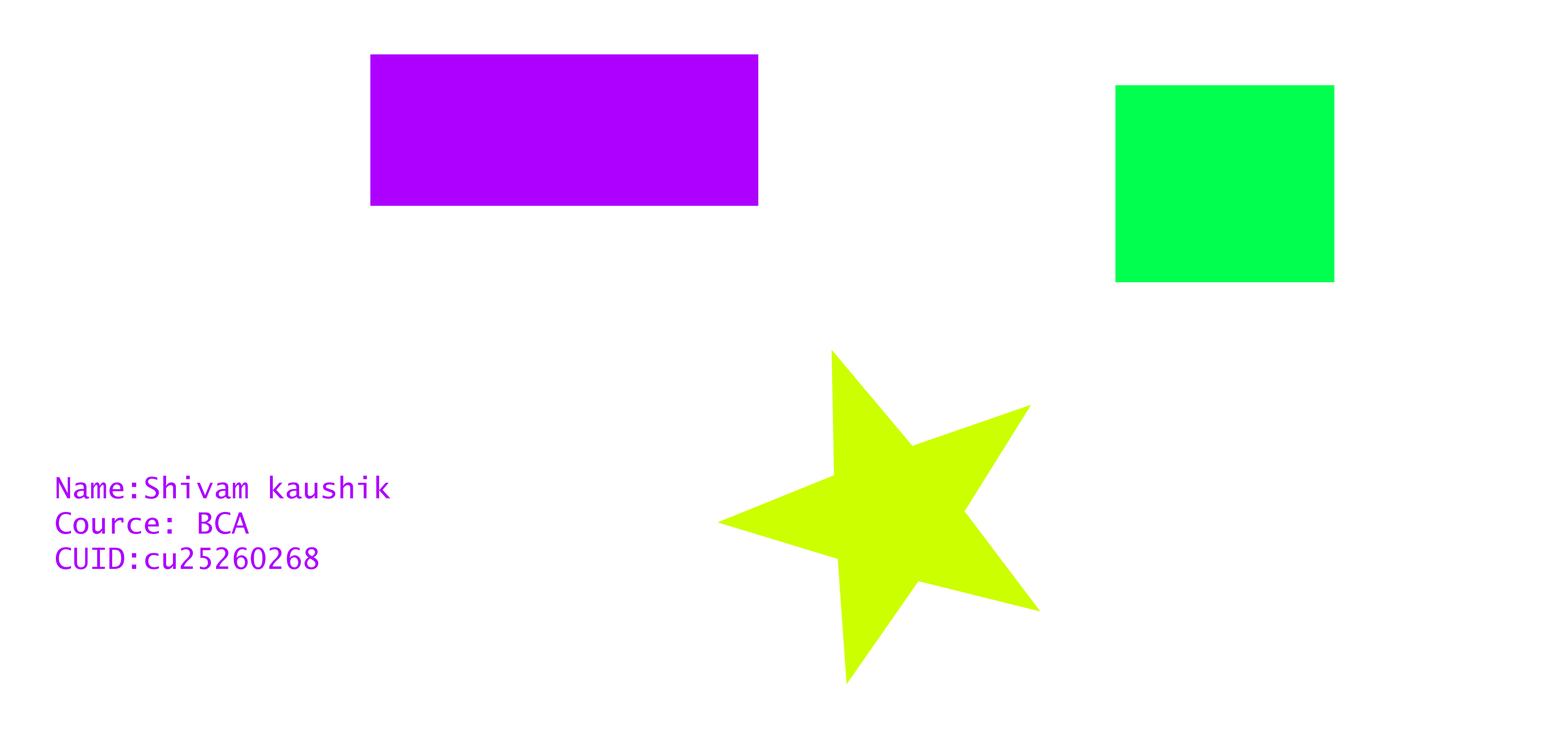
<style>
.page{position:relative;width:1568px;height:735px;background:#ffffff}
.page>*{position:absolute;margin:0}
.t1{font:29.4px "LucidaSans-Typewriter";color:#ae00ff}
</style>
<div class="page">
<p class="t1" style="left:56px;top:475px;width:335px;height:94px">Name:Shivam kaushik<br>Cource: BCA<br>CUID:cu25260268</p>
</div>
